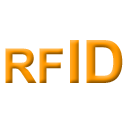
<style>
.page{position:relative;width:128px;height:128px;background:#ffffff}
.page>*{position:absolute;margin:0}
.t1{font:48px "Arial-BoldMT";color:#ff9900}
.t2{font:60px "Arial-BoldMT";color:#ff9900}
</style>
<div class="page">
<p class="t1" style="left:5px;top:40px;width:118px;height:43px">RF<span class="t2">ID</span></p>
</div>
